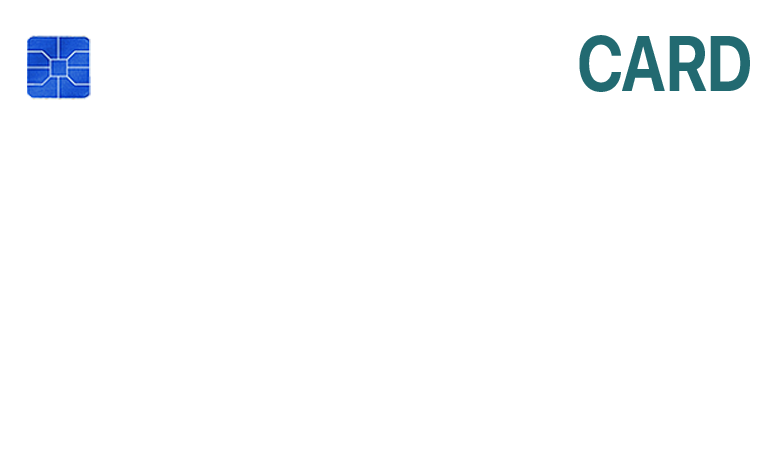
<style>
.page{position:relative;width:780px;height:471px;background:#ffffff}
.page>*{position:absolute;margin:0}
.t1{font:78.1px "SFProDisplay-Bold";color:#226a71;scale:0.83 1}
</style>
<div class="page">
<p class="t1" style="left:579px;top:35px;width:171px;height:57px">CARD</p>
</div>
